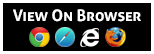
<style>
.page{position:relative;width:154px;height:54px;background:#000000}
.page>*{position:absolute;margin:0}
.t1{font:16px "Aller-Bold";color:#ffffff;font-variant:small-caps}
</style>
<div class="page">
<p class="t1" style="left:13px;top:9px;width:128px;height:13px">View On Browser</p>
</div>
